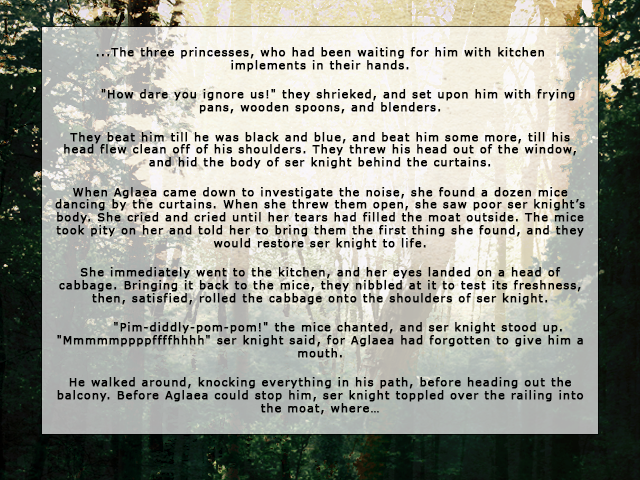
<style>
.page{position:relative;width:640px;height:480px}
.page>*{position:absolute;margin:0}
.t1{font:10.7px "Verdana";letter-spacing:0.1em;color:#000000;font-weight:bold}
</style>
<div class="page">
<p class="t1" style="left:55px;top:47px;width:530px;height:368px;text-align:center">...The three princesses, who had been waiting for him with kitchen implements in their hands. <br> <br> "How dare you ignore us!" they shrieked, and set upon him with frying pans, wooden spoons, and blenders. <br><br>They beat him till he was black and blue, and beat him some more, till his head flew clean off of his shoulders. They threw his head out of the window, and hid the body of ser knight behind the curtains. <br><br>When Aglaea came down to investigate the noise, she found a dozen mice dancing by the curtains. When she threw them open, she saw poor ser knight’s body. She cried and cried until her tears had filled the moat outside. The mice took pity on her and told her to bring them the first thing she found, and they would restore ser knight to life. <br><br>She immediately went to the kitchen, and her eyes landed on a head of cabbage. Bringing it back to the mice, they nibbled at it to test its freshness, then, satisfied, rolled the cabbage onto the shoulders of ser knight. <br><br> "Pim-diddly-pom-pom!" the mice chanted, and ser knight stood up. "Mmmmmppppffffhhhh" ser knight said, for Aglaea had forgotten to give him a mouth. <br><br>He walked around, knocking everything in his path, before heading out the balcony. Before Aglaea could stop him, ser knight toppled over the railing into the moat, where…</p>
</div>
